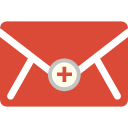
<style>
.page{position:relative;width:128px;height:128px;background:#db4a37}
.page>*{position:absolute;margin:0}
.t1{font:30.6px "NewsGothicStd-Bold";letter-spacing:0.065em;color:#db4a37}
</style>
<div class="page">
<p class="t1" style="left:57px;top:66px;width:15px;height:16px">+</p>
</div>
